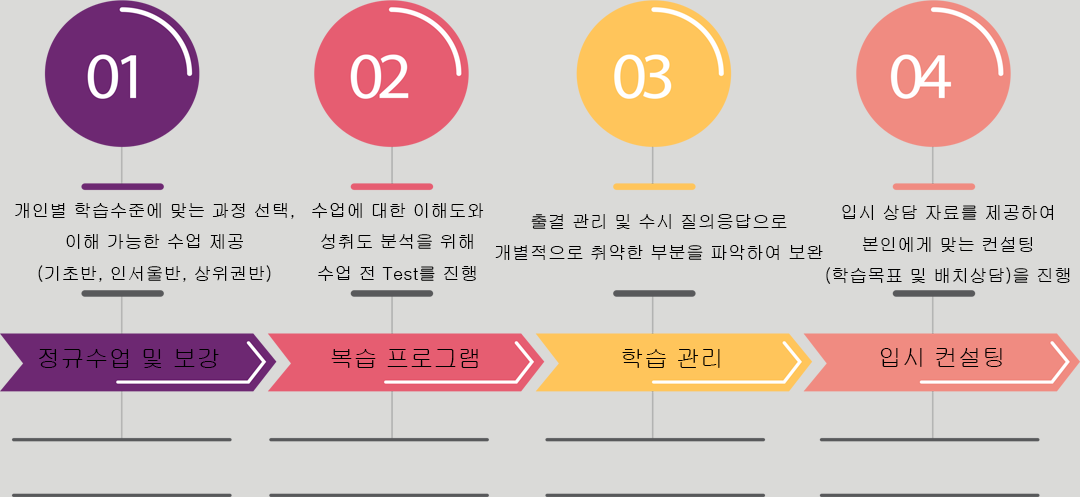
<style>
.page{position:relative;width:1080px;height:497px;background:#dadad8}
.page>*{position:absolute;margin:0}
.t1{font:18px "Gulim";color:#000000}
.t2{font:24px "Gulim";color:#000000}
</style>
<div class="page">
<p class="t1" style="left:15px;top:203px;width:279px;height:79px;text-align:center">개인별 학습수준에 맞는 과정 선택,<br>이해 가능한 수업 제공<br>(기초반, 인서울반, 상위권반)</p>
<p class="t1" style="left:312px;top:203px;width:172px;height:78px;text-align:center">수업에 대한 이해도와<br>성취도 분석을 위해<br>수업 전 Test를 진행</p>
<p class="t1" style="left:826px;top:205px;width:244px;height:79px;text-align:center">입시 상담 자료를 제공하여<br>본인에게 맞는 컨설팅<br>(학습목표 및 배치상담)을 진행</p>
<p class="t1" style="left:495px;top:214px;width:328px;height:46px;text-align:center">출결 관리 및 수시 질의응답으로<br>개별적으로 취약한 부분을 파악하여 보완</p>
<p class="t2" style="left:39px;top:349px;width:180px;height:19px">정규수업 및 보강</p>
<p class="t2" style="left:331px;top:349px;width:147px;height:19px">복습 프로그램</p>
<p class="t2" style="left:622px;top:349px;width:98px;height:19px">학습 관리</p>
<p class="t2" style="left:880px;top:348px;width:122px;height:19px">입시 컨설팅</p>
</div>
